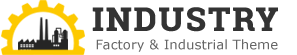
<style>
.page{position:relative;width:297px;height:55px;background:#ffffff}
.page>*{position:absolute;margin:0}
.t1{font:32.3px "RobotoSlab-Bold";letter-spacing:0.04em;color:#333333;text-transform:uppercase;font-weight:bold}
.t2{font:13.1px "Verdana";color:#666666}
</style>
<div class="page">
<p class="t1" style="left:92px;top:7px;width:186px;height:25px">industry</p>
<p class="t2" style="left:96px;top:39px;width:182px;height:13px">Factory &amp; Industrial Theme</p>
</div>
